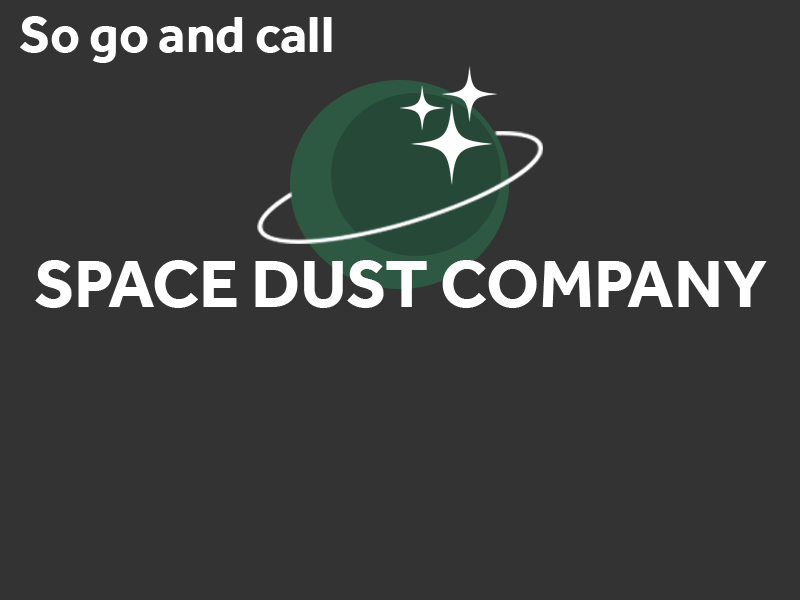
<style>
.page{position:relative;width:800px;height:600px;background:#333333}
.page>*{position:absolute;margin:0}
.t1{font:52.7px "Effra-Bold";color:#ffffff}
.t2{font:68.6px "Effra-Bold";color:#ffffff}
</style>
<div class="page">
<p class="t1" style="left:20px;top:16px;width:312px;height:47px">So go and call</p>
<p class="t2" style="left:35px;top:260px;width:732px;height:48px">SPACE DUST COMPANY</p>
</div>
